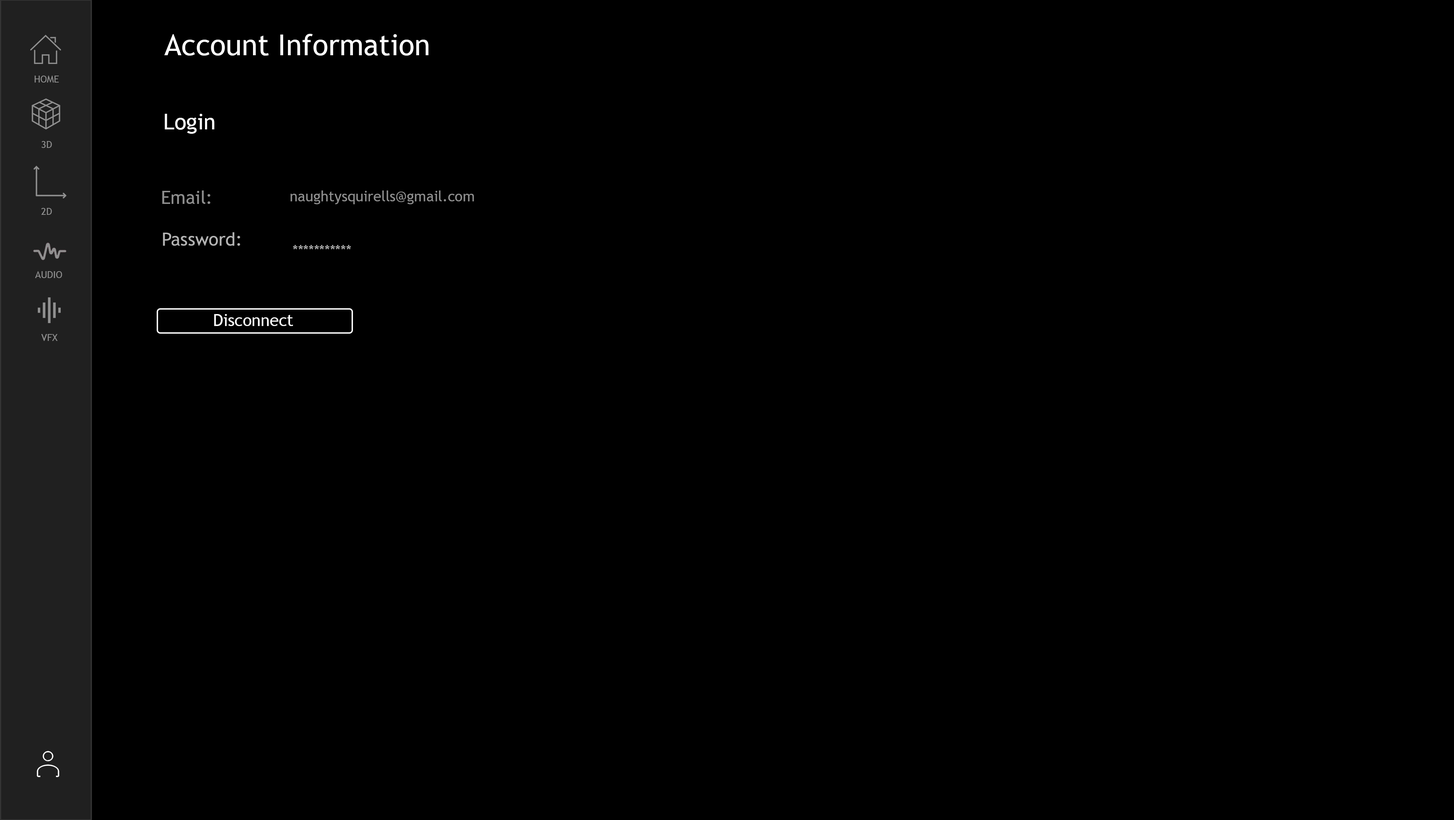
<style>
.page{position:relative;width:1454px;height:820px;background:#000000}
.page>*{position:absolute;margin:0}
.t1{font:29.1px "TrebuchetMS";color:#ffffff}
.t2{font:9.7px "TrebuchetMS";color:#909090}
.t3{font:21.8px "TrebuchetMS";color:#ffffff}
.t4{font:18.2px "TrebuchetMS";color:#8e8e8e}
.t5{font:14.5px "TrebuchetMS";color:#8e8e8e}
.t6{font:18.2px "TrebuchetMS";color:#b3b3b3}
.t7{font:14.5px "TrebuchetMS";color:#b3b3b3}
.t8{font:16.6px "TrebuchetMS";color:#ffffff}
</style>
<div class="page">
<p class="t1" style="left:164px;top:34px;width:265px;height:22px">Account Information</p>
<p class="t2" style="left:35px;top:76px;width:24px;height:7px">HOME</p>
<p class="t3" style="left:165px;top:114px;width:49px;height:20px">Login</p>
<p class="t2" style="left:41px;top:141px;width:11px;height:7px">3D</p>
<p class="t4" style="left:162px;top:190px;width:48px;height:14px">Email:</p>
<p class="t5" style="left:290px;top:190px;width:184px;height:14px">naughtysquirells@gmail.com</p>
<p class="t2" style="left:41px;top:208px;width:11px;height:7px">2D</p>
<p class="t6" style="left:163px;top:232px;width:77px;height:14px">Password:</p>
<p class="t7" style="left:293px;top:245px;width:58px;height:4px">***********</p>
<p class="t2" style="left:35px;top:271px;width:27px;height:7px">AUDIO</p>
<p class="t8" style="left:214px;top:314px;width:79px;height:12px">Disconnect</p>
<p class="t2" style="left:41px;top:334px;width:17px;height:7px">VFX</p>
</div>
